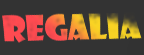
<style>
.page{position:relative;width:144px;height:55px;background:#333333}
.page>*{position:absolute;margin:0}
.t1{font:34.2px "ShowcardGothic-Reg"}
</style>
<div class="page">
<p class="t1" style="left:1px;top:11px;width:141px;height:32px;rotate:-1deg">regalia</p>
</div>
